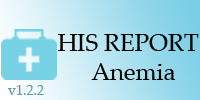
<style>
.page{position:relative;width:200px;height:100px}
.page>*{position:absolute;margin:0}
.t1{font:24px "PalatinoLinotype-Roman";color:#000101}
.t2{font:14px "PalatinoLinotype-Roman";color:#5b99ab}
</style>
<div class="page">
<p class="t1" style="left:58px;top:34px;width:141px;height:46px;text-align:center">HIS REPORT <br> Anemia</p>
<p class="t2" style="left:8px;top:85px;width:36px;height:10px">v1.2.2</p>
</div>
